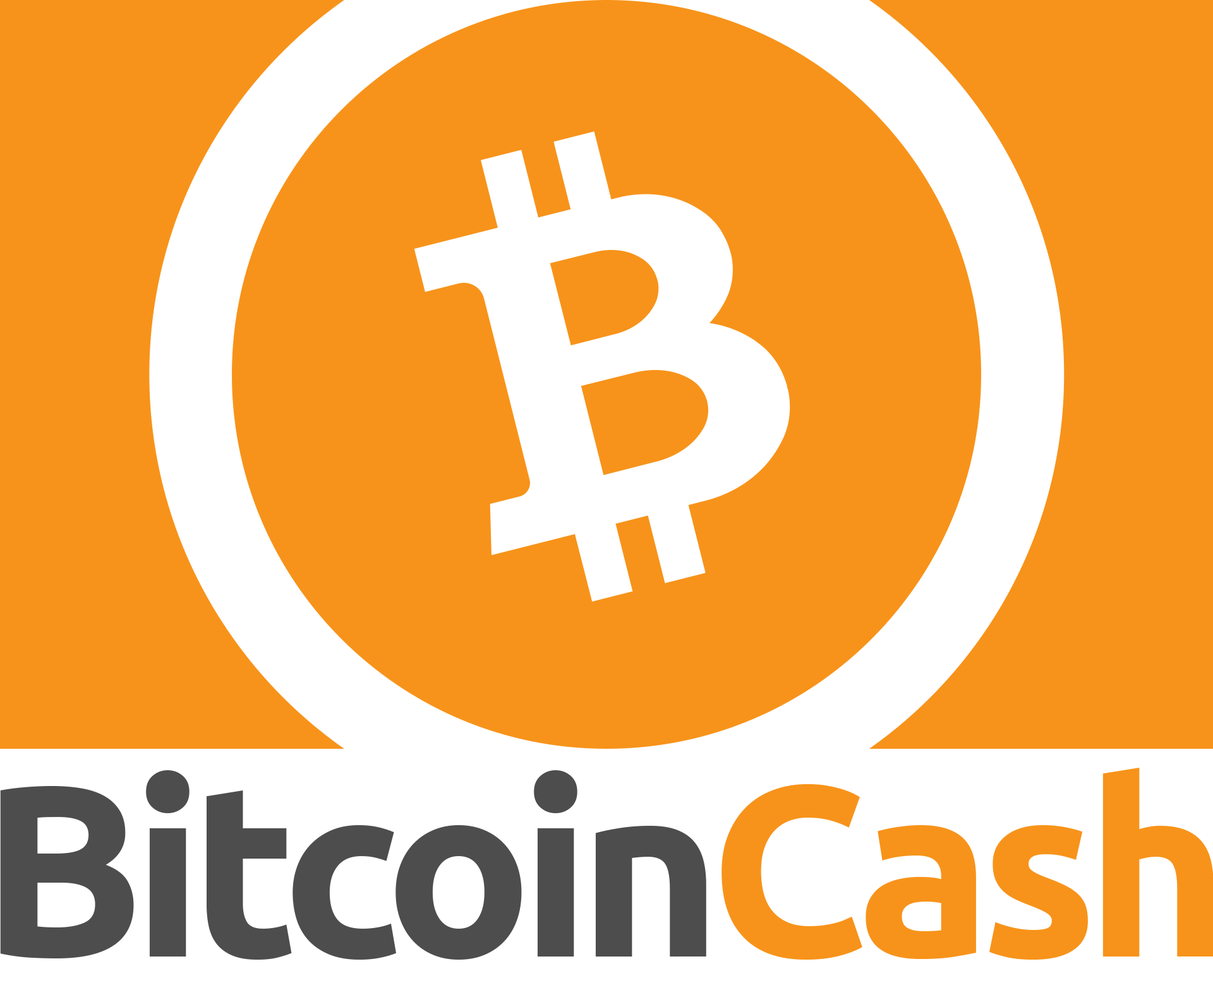
<style>
.page{position:relative;width:1213px;height:983px;background:#f7931a}
.page>*{position:absolute;margin:0}
.t1{font:243.1px "Ubuntu-Bold";letter-spacing:-0.05em;color:#4d4d4d}
.t2{font:243.1px "Ubuntu-Bold";letter-spacing:-0.05em;color:#f7931a}
</style>
<div class="page">
<p class="t1" style="left:0px;top:767px;width:1213px;height:193px">Bitcoin<span class="t2">Cash</span></p>
</div>
